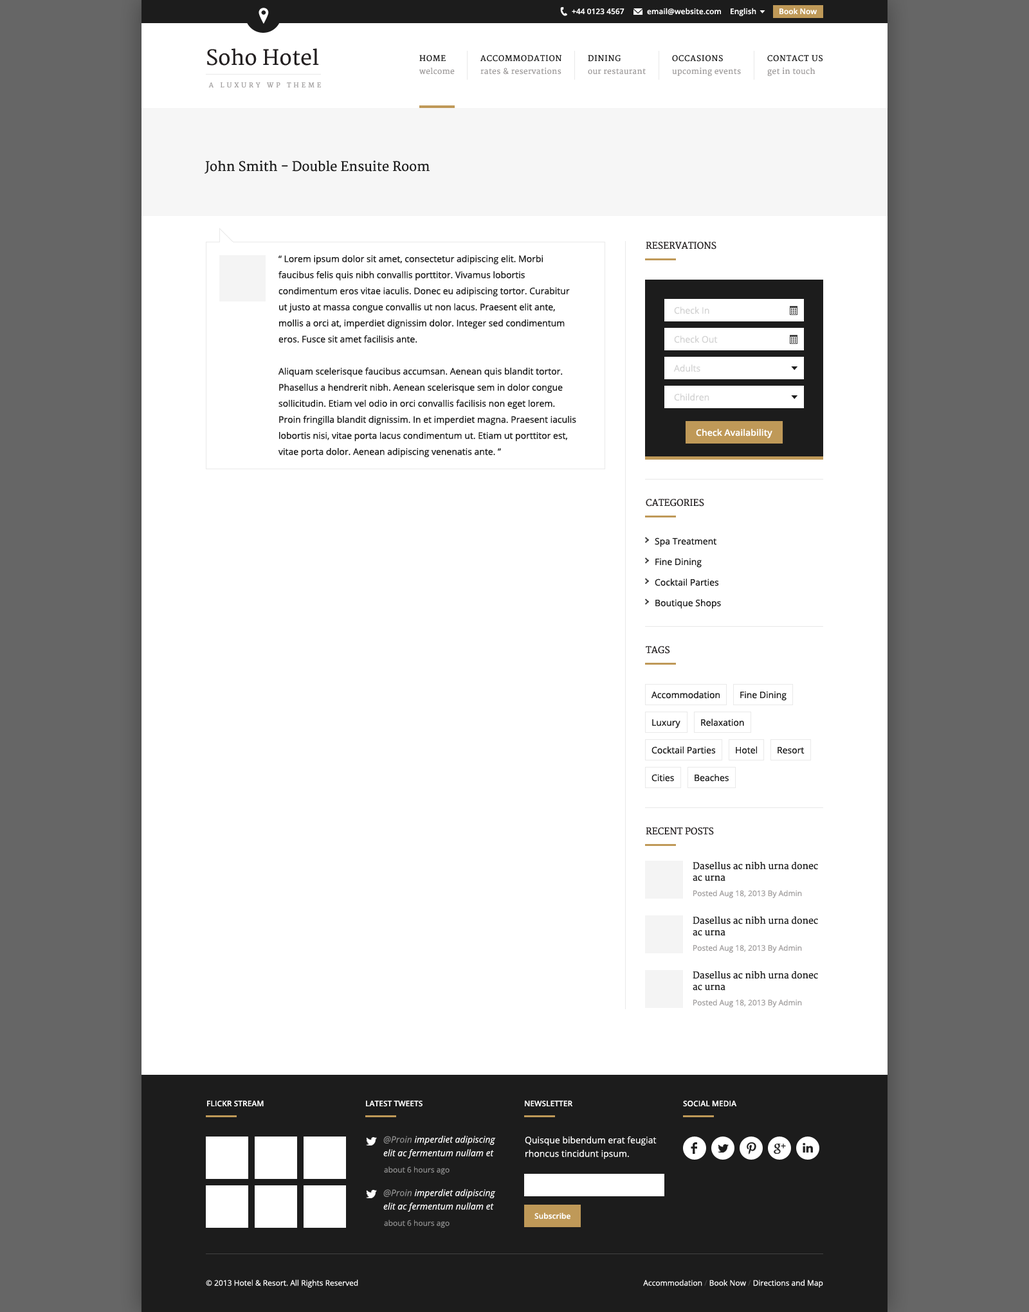
<style>
.page{position:relative;width:1029px;height:1312px;background:#ffffff}
.page>*{position:absolute;margin:0}
.t1{font:7.7px "OpenSans-Semibold";color:#ffffff}
.t2{font:20.6px "Merriweather";color:#231f20}
.t3{font:7.7px "Merriweather";letter-spacing:0.075em;color:#1c1c1c;text-transform:uppercase}
.t4{font:7.7px "Merriweather";letter-spacing:0.025em;color:#a09d9d}
.t5{font:6.4px "Merriweather";letter-spacing:0.4em;color:#a09d9d;text-transform:uppercase}
.t6{font:12.9px "Merriweather";color:#1c1c1c}
.t7{font:9px "Merriweather";color:#231f20;text-transform:uppercase}
.t8{font:9px/16.1px "OpenSans";color:#1c1c1c}
.t9{font:9px "OpenSans";color:#d3d3d3}
.t10{font:9px "OpenSans-Semibold";color:#ffffff}
.t11{font:9px "OpenSans";color:#1c1c1c}
.t12{font:9px/11.6px "Merriweather";color:#1c1c1c}
.t13{font:7.7px "OpenSans";color:#a09d9d}
.t14{font:7.7px "OpenSans-Semibold";color:#ffffff;text-transform:uppercase}
.t15{font:9px/13.5px "OpenSans-Italic";color:#ffffff}
.t16{font:9px/13.5px "OpenSans-Italic";color:#8b8b8b}
.t17{font:9px/13.5px "OpenSans";color:#ffffff}
.t18{font:7.7px "OpenSans";color:#8b8b8b}
.t19{font:7.7px "OpenSans";color:#ffffff}
.t20{font:7.7px "OpenSans";color:#424242}
</style>
<div class="page">
<p class="t1" style="left:572px;top:8px;width:52px;height:7px">+44 0123 4567</p>
<p class="t1" style="left:647px;top:8px;width:74px;height:7px">email@website.com</p>
<p class="t1" style="left:730px;top:8px;width:26px;height:8px">English</p>
<p class="t1" style="left:779px;top:8px;width:37px;height:7px">Book Now</p>
<p class="t2" style="left:207px;top:48px;width:112px;height:18px">Soho Hotel</p>
<p class="t3" style="left:419px;top:55px;width:27px;height:7px">Home</p>
<p class="t3" style="left:480px;top:55px;width:81px;height:7px">Accommodation</p>
<p class="t3" style="left:588px;top:55px;width:32px;height:7px">Dining</p>
<p class="t3" style="left:672px;top:55px;width:51px;height:7px">Occasions</p>
<p class="t3" style="left:767px;top:55px;width:55px;height:7px">Contact Us</p>
<p class="t4" style="left:419px;top:68px;width:36px;height:7px">welcome</p>
<p class="t4" style="left:480px;top:68px;width:81px;height:7px">rates &amp; reservations</p>
<p class="t4" style="left:588px;top:68px;width:57px;height:7px">our restaurant</p>
<p class="t4" style="left:672px;top:68px;width:69px;height:9px">upcoming events</p>
<p class="t4" style="left:767px;top:68px;width:48px;height:9px">get in touch</p>
<p class="t5" style="left:208px;top:82px;width:113px;height:6px">A Luxury WP Theme</p>
<p class="t6" style="left:204px;top:160px;width:225px;height:14px">John Smith - Double Ensuite Room</p>
<p class="t7" style="left:645px;top:242px;width:71px;height:7px">Reservations</p>
<p class="t8" style="left:278px;top:255px;width:298px;height:203px">“ Lorem ipsum dolor sit amet, consectetur adipiscing elit. Morbi faucibus felis quis nibh convallis porttitor. Vivamus lobortis condimentum eros vitae iaculis. Donec eu adipiscing tortor. Curabitur ut justo at massa congue convallis ut non lacus. Praesent elit ante, mollis a orci at, imperdiet dignissim dolor. Integer sed condimentum eros. Fusce sit amet facilisis ante.<br><br>Aliquam scelerisque faucibus accumsan. Aenean quis blandit tortor. Phasellus a hendrerit nibh. Aenean scelerisque sem in dolor congue sollicitudin. Etiam vel odio in orci convallis facilisis non eget lorem. Proin fringilla blandit dignissim. In et imperdiet magna. Praesent iaculis lobortis nisi, vitae porta lacus condimentum ut. Etiam ut porttitor est, vitae porta dolor. Aenean adipiscing venenatis ante. ”</p>
<p class="t9" style="left:674px;top:307px;width:35px;height:7px">Check In</p>
<p class="t9" style="left:674px;top:336px;width:43px;height:7px">Check Out</p>
<p class="t9" style="left:673px;top:365px;width:27px;height:7px">Adults</p>
<p class="t9" style="left:674px;top:393px;width:35px;height:8px">Children</p>
<p class="t10" style="left:696px;top:429px;width:76px;height:9px">Check Availability</p>
<p class="t7" style="left:645px;top:499px;width:59px;height:8px">Categories</p>
<p class="t11" style="left:654px;top:537px;width:62px;height:10px">Spa Treatment</p>
<p class="t11" style="left:655px;top:558px;width:46px;height:10px">Fine Dining</p>
<p class="t11" style="left:654px;top:579px;width:65px;height:7px">Cocktail Parties</p>
<p class="t11" style="left:655px;top:599px;width:66px;height:10px">Boutique Shops</p>
<p class="t7" style="left:645px;top:646px;width:25px;height:8px">Tags</p>
<p class="t11" style="left:651px;top:691px;width:68px;height:8px">Accommodation</p>
<p class="t11" style="left:740px;top:691px;width:46px;height:10px">Fine Dining</p>
<p class="t11" style="left:652px;top:719px;width:28px;height:9px">Luxury</p>
<p class="t11" style="left:701px;top:719px;width:43px;height:7px">Relaxation</p>
<p class="t11" style="left:651px;top:746px;width:65px;height:8px">Cocktail Parties</p>
<p class="t11" style="left:735px;top:746px;width:22px;height:8px">Hotel</p>
<p class="t11" style="left:777px;top:747px;width:27px;height:7px">Resort</p>
<p class="t11" style="left:651px;top:774px;width:23px;height:8px">Cities</p>
<p class="t11" style="left:694px;top:774px;width:34px;height:8px">Beaches</p>
<p class="t7" style="left:645px;top:827px;width:69px;height:8px">Recent Posts</p>
<p class="t12" style="left:692px;top:861px;width:126px;height:20px">Dasellus ac nibh urna donec <br>ac urna</p>
<p class="t13" style="left:693px;top:890px;width:109px;height:8px">Posted Aug 18, 2013 By Admin</p>
<p class="t12" style="left:692px;top:916px;width:126px;height:20px">Dasellus ac nibh urna donec <br>ac urna</p>
<p class="t13" style="left:693px;top:944px;width:109px;height:9px">Posted Aug 18, 2013 By Admin</p>
<p class="t12" style="left:692px;top:971px;width:126px;height:20px">Dasellus ac nibh urna donec <br>ac urna</p>
<p class="t13" style="left:693px;top:999px;width:109px;height:8px">Posted Aug 18, 2013 By Admin</p>
<p class="t14" style="left:207px;top:1101px;width:57px;height:6px">Flickr Stream</p>
<p class="t14" style="left:366px;top:1101px;width:56px;height:6px">Latest Tweets</p>
<p class="t14" style="left:525px;top:1101px;width:48px;height:6px">Newsletter</p>
<p class="t14" style="left:683px;top:1101px;width:54px;height:6px">Social Media</p>
<p class="t15" style="left:383px;top:1135px;width:113px;height:23px"><span class="t16">@Proin </span>imperdiet adipiscing elit ac fermentum nullam et</p>
<p class="t17" style="left:525px;top:1136px;width:131px;height:23px">Quisque bibendum erat feugiat rhoncus tincidunt ipsum.</p>
<p class="t18" style="left:384px;top:1166px;width:65px;height:9px">about 6 hours ago</p>
<p class="t15" style="left:383px;top:1189px;width:113px;height:23px"><span class="t16">@Proin</span> imperdiet adipiscing elit ac fermentum nullam et</p>
<p class="t1" style="left:534px;top:1212px;width:36px;height:8px">Subscribe</p>
<p class="t18" style="left:384px;top:1220px;width:65px;height:8px">about 6 hours ago</p>
<p class="t19" style="left:206px;top:1279px;width:152px;height:9px">© 2013 Hotel &amp; Resort. All Rights Reserved</p>
<p class="t19" style="left:643px;top:1279px;width:180px;height:9px">Accommodation <span class="t20">/</span> Book Now <span class="t20">/</span> Directions and Map</p>
</div>
